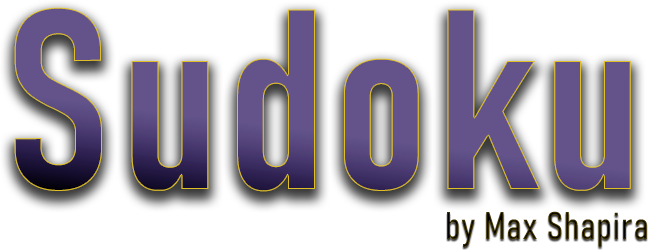
<style>
.page{position:relative;width:648px;height:250px;background:#ffffff}
.page>*{position:absolute;margin:0}
.t1{font:252.5px "Bahnschrift-SemiBoldCondensed";letter-spacing:0.025em;color:#63538a}
.t2{font:37.9px "Bahnschrift-SemiLightCondensed";letter-spacing:0.025em}
</style>
<div class="page">
<p class="t1" style="left:14px;top:7px;width:617px;height:185px">Sudoku</p>
<p class="t2" style="left:447px;top:211px;width:200px;height:36px">by Max Shapira</p>
</div>
